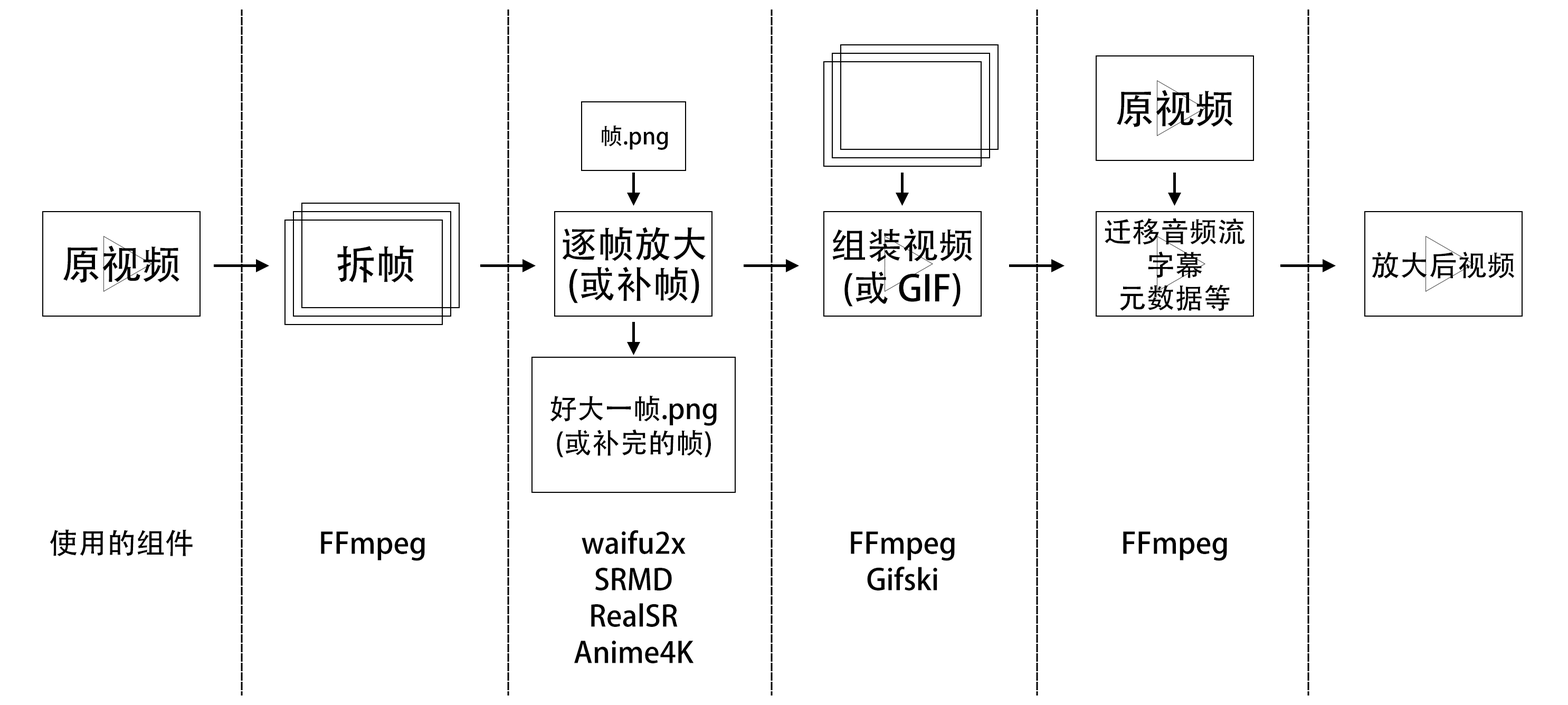
<style>
.page{position:relative;width:1568px;height:705px;background:#ffffff}
.page>*{position:absolute;margin:0}
.t1{font:40.1px "AdobeHeitiStd-Regular";color:#000000}
.t2{font:22.7px "AdobeHeitiStd-Regular";color:#000000}
.t3{font:28.5px/33.2px "AdobeHeitiStd-Regular";color:#000000}
.t4{font:36.9px/40.1px "AdobeHeitiStd-Regular";color:#000000}
.t5{font:35.9px/42.7px "AdobeHeitiStd-Regular";color:#000000}
.t6{font:29px "AdobeHeitiStd-Regular";color:#000000}
.t7{font:28px/34.3px "AdobeHeitiStd-Regular";color:#000000}
.t8{font:29px/36.4px "AdobeHeitiStd-Regular";color:#000000}
</style>
<div class="page">
<p class="t1" style="left:1117px;top:90px;width:116px;height:37px">原视频</p>
<p class="t2" style="left:602px;top:125px;width:66px;height:25px">帧.png</p>
<p class="t3" style="left:1105px;top:218px;width:140px;height:93px;text-align:center">迁移音频流<br>字幕<br>元数据等</p>
<p class="t4" style="left:562px;top:227px;width:144px;height:76px;text-align:center">逐帧放大<br>(或补帧)</p>
<p class="t5" style="left:832px;top:229px;width:141px;height:78px;text-align:center">组装视频<br>(或 GIF)</p>
<p class="t1" style="left:63px;top:245px;width:116px;height:38px">原视频</p>
<p class="t1" style="left:337px;top:245px;width:77px;height:38px">拆帧</p>
<p class="t6" style="left:1372px;top:252px;width:143px;height:27px">放大后视频</p>
<p class="t7" style="left:550px;top:395px;width:167px;height:63px;text-align:center">好大一帧.png<br>(或补完的帧)</p>
<p class="t6" style="left:50px;top:529px;width:143px;height:27px">使用的组件</p>
<p class="t6" style="left:321px;top:531px;width:104px;height:30px">FFmpeg</p>
<p class="t8" style="left:574px;top:530px;width:120px;height:133px;text-align:center">waifu2x<br>SRMD<br>RealSR<br>Anime4K</p>
<p class="t8" style="left:851px;top:531px;width:104px;height:60px;text-align:center">FFmpeg<br>Gifski</p>
<p class="t6" style="left:1123px;top:531px;width:104px;height:30px">FFmpeg</p>
</div>
